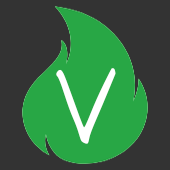
<style>
.page{position:relative;width:170px;height:170px;background:#333333}
.page>*{position:absolute;margin:0}
.t1{font:136px "HY-JingBRJ";color:#ffffff}
</style>
<div class="page">
<p class="t1" style="left:56px;top:68px;width:60px;height:76px">V</p>
</div>
